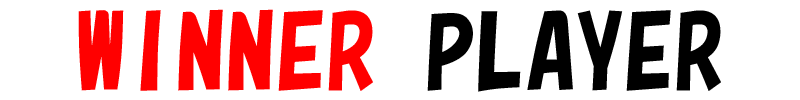
<style>
.page{position:relative;width:800px;height:100px;background:#ffffff}
.page>*{position:absolute;margin:0}
.t1{font:99.6px "HGSoeiKakupoptai";color:#ff0000}
.t2{font:99.6px "HGSoeiKakupoptai";color:#000000}
</style>
<div class="page">
<p class="t1" style="left:78px;top:9px;width:643px;height:83px">WINNER<span class="t2"> PLAYER</span></p>
</div>
